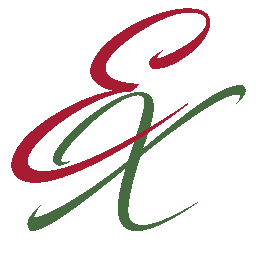
<style>
.page{position:relative;width:256px;height:256px;background:#ffffff}
.page>*{position:absolute;margin:0}
.t1{font:169.3px "Blacksword";color:#a71c32;font-style:italic}
.t2{font:138.9px "Blacksword";color:#476b40;font-style:italic}
</style>
<div class="page">
<p class="t1" style="left:11px;top:8px;width:199px;height:175px">E</p>
<p class="t2" style="left:27px;top:85px;width:219px;height:146px">X</p>
</div>
